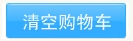
<style>
.page{position:relative;width:133px;height:41px}
.page>*{position:absolute;margin:0}
.t1{font:18px "SimHei";color:#fdfefb}
</style>
<div class="page">
<p class="t1" style="left:23px;top:13px;width:88px;height:17px">清空购物车</p>
</div>
